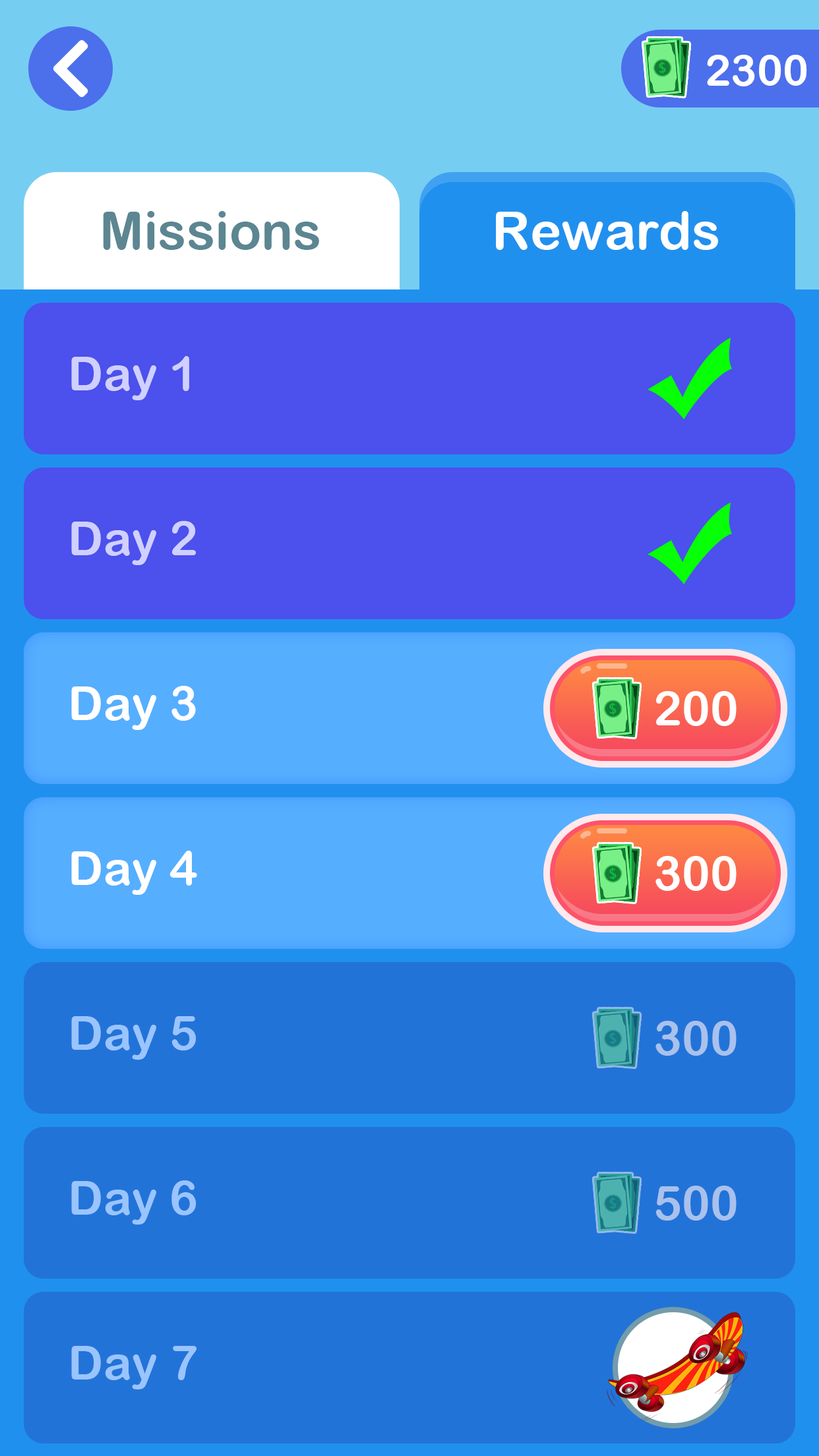
<style>
.page{position:relative;width:819px;height:1456px;background:#2273d8}
.page>*{position:absolute;margin:0}
.t1{font:43.5px "ArialRoundedMTBold";color:#ffffff}
.t2{font:52.8px "ArialRoundedMTBold";color:#5c8691}
.t3{font:52.8px "ArialRoundedMTBold";color:#ffffff}
.t4{font:47.5px "ArialRoundedMTBold";color:#cfd0ff}
.t5{font:47.5px "ArialRoundedMTBold";color:#ffffff}
.t6{font:47.5px "ArialRoundedMTBold";color:#9ac4fd}
.t7{font:47.5px "ArialRoundedMTBold";color:#a9c1ec}
</style>
<div class="page">
<p class="t1" style="left:707px;top:55px;width:100px;height:31px">2300</p>
<p class="t2" style="left:103px;top:211px;width:216px;height:39px">Missions</p>
<p class="t3" style="left:496px;top:211px;width:222px;height:39px">Rewards</p>
<p class="t4" style="left:71px;top:356px;width:118px;height:44px">Day 1</p>
<p class="t4" style="left:71px;top:521px;width:125px;height:44px">Day 2</p>
<p class="t5" style="left:71px;top:686px;width:125px;height:44px">Day 3</p>
<p class="t5" style="left:656px;top:691px;width:81px;height:35px">200</p>
<p class="t5" style="left:71px;top:851px;width:126px;height:44px">Day 4</p>
<p class="t5" style="left:655px;top:856px;width:82px;height:35px">300</p>
<p class="t6" style="left:71px;top:1016px;width:125px;height:44px">Day 5</p>
<p class="t7" style="left:655px;top:1021px;width:82px;height:35px">300</p>
<p class="t6" style="left:71px;top:1180px;width:126px;height:45px">Day 6</p>
<p class="t7" style="left:655px;top:1186px;width:82px;height:35px">500</p>
<p class="t6" style="left:71px;top:1346px;width:126px;height:43px">Day 7</p>
</div>
